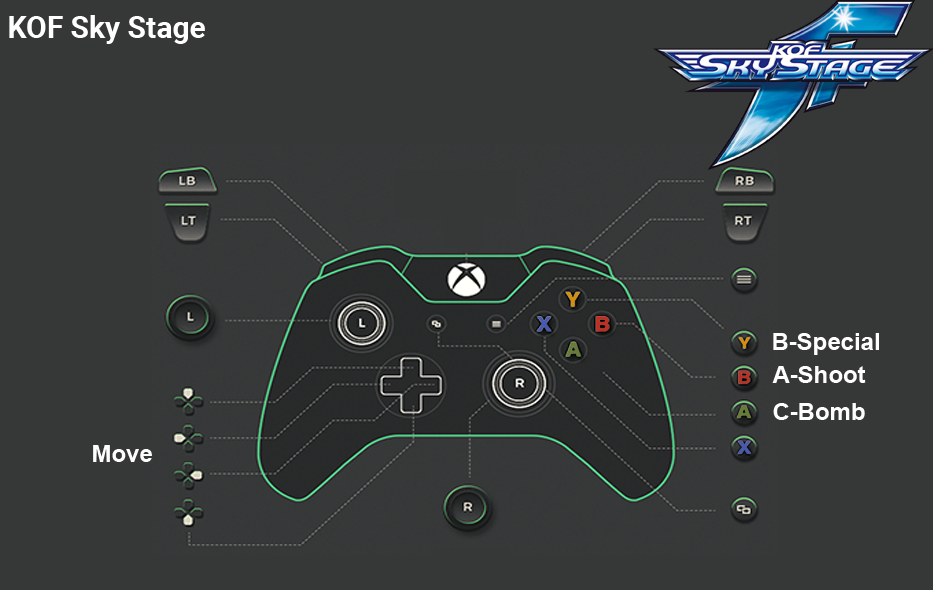
<style>
.page{position:relative;width:933px;height:590px;background:#363838}
.page>*{position:absolute;margin:0}
.t1{font:30px "Roboto-Bold";color:#ffffff}
.t2{font:24px "Arial-BoldMT";color:#fefefe}
</style>
<div class="page">
<p class="t1" style="left:9px;top:15px;width:196px;height:29px">KOF Sky Stage</p>
<p class="t2" style="left:773px;top:333px;width:106px;height:22px">B-Special</p>
<p class="t2" style="left:772px;top:366px;width:94px;height:17px">A-Shoot</p>
<p class="t2" style="left:773px;top:403px;width:92px;height:17px">C-Bomb</p>
<p class="t2" style="left:93px;top:445px;width:59px;height:17px">Move</p>
</div>
